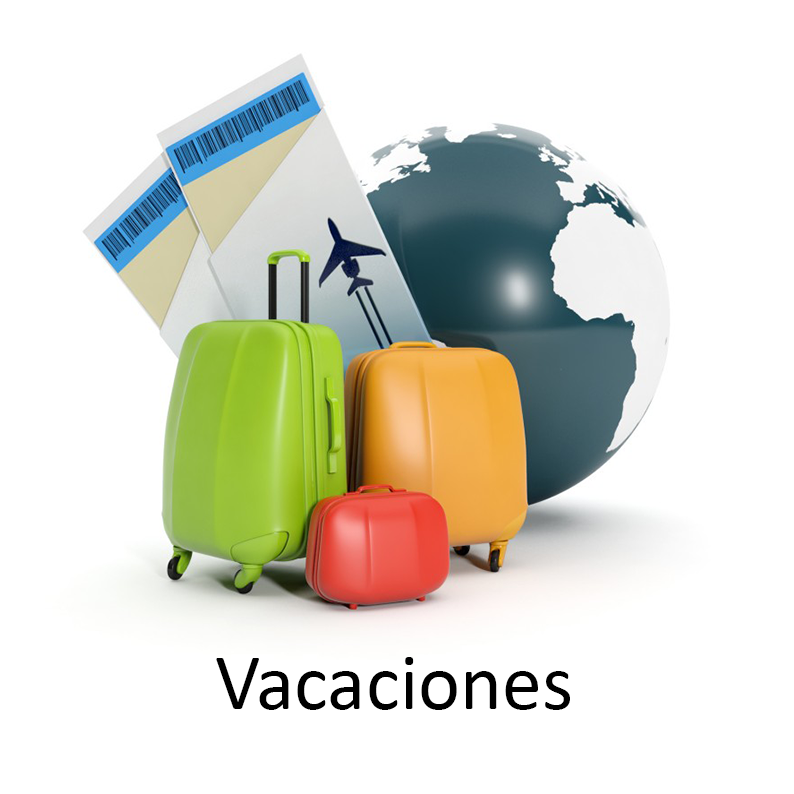
<style>
.page{position:relative;width:794px;height:794px;background:#ffffff}
.page>*{position:absolute;margin:0}
.t1{font:80px "Calibri";color:#000000}
</style>
<div class="page">
<p class="t1" style="left:216px;top:657px;width:354px;height:53px">Vacaciones</p>
</div>
